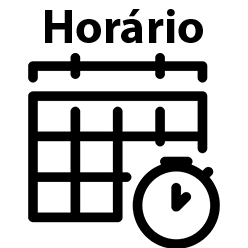
<style>
.page{position:relative;width:248px;height:248px;background:#ffffff}
.page>*{position:absolute;margin:0}
.t1{font:48px "MyriadPro-Bold";color:#000000}
</style>
<div class="page">
<p class="t1" style="left:45px;top:9px;width:158px;height:34px">Horário</p>
</div>
